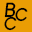
<style>
.page{position:relative;width:32px;height:32px;background:#ea9d04}
.page>*{position:absolute;margin:0}
.t1{font:19.9px "LouisGeorgeCafe-BoldItalic";color:#000000}
.t2{font:18.4px "LouisGeorgeCafe-BoldItalic";color:#000000}
</style>
<div class="page">
<p class="t1" style="left:4px;top:2px;width:12px;height:16px">B</p>
<p class="t2" style="left:4px;top:16px;width:13px;height:15px">C</p>
<p class="t2" style="left:15px;top:7px;width:13px;height:15px">C</p>
</div>
